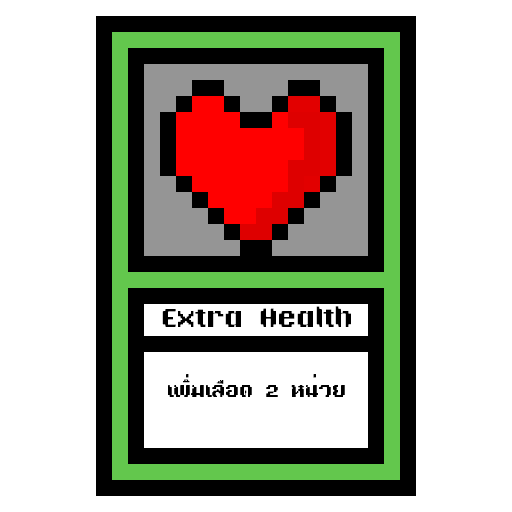
<style>
.page{position:relative;width:512px;height:512px;background:#ffffff}
.page>*{position:absolute;margin:0}
.t1{font:24px "TA16BIT-Regular";color:#000000}
.t2{font:18px "TA16BIT-Regular";color:#000000}
</style>
<div class="page">
<p class="t1" style="left:162px;top:306px;width:189px;height:21px">Extra Health</p>
<p class="t2" style="left:168px;top:374px;width:177px;height:23px">เพิ่มเลือด 2 หน่วย</p>
</div>
